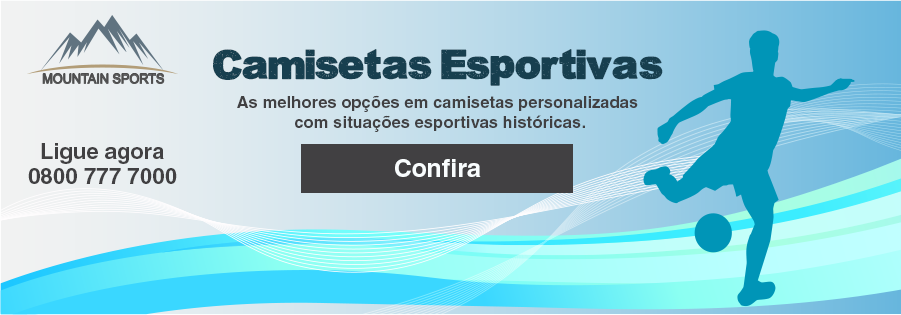
<style>
.page{position:relative;width:901px;height:315px}
.page>*{position:absolute;margin:0}
.t1{font:33.3px "AsmatFont2007";color:#173f4f}
.t2{font:16.7px "Helvetica-Bold";color:#414042}
.t3{font:21.9px "Helvetica-Bold";color:#414042}
.t4{font:25px "Helvetica-Bold";color:#f9fdfe}
.t5{font:22.4px "Helvetica-Bold";color:#414042}
</style>
<div class="page">
<p class="t1" style="left:213px;top:49px;width:450px;height:37px">Camisetas Esportivas</p>
<p class="t2" style="left:237px;top:95px;width:401px;height:37px;text-align:center">As melhores opções em camisetas personalizadas<br> com situações esportivas históricas.</p>
<p class="t3" style="left:41px;top:143px;width:123px;height:21px">Ligue agora</p>
<p class="t4" style="left:395px;top:159px;width:86px;height:18px">Confira</p>
<p class="t5" style="left:28px;top:168px;width:149px;height:16px">0800 777 7000</p>
</div>
